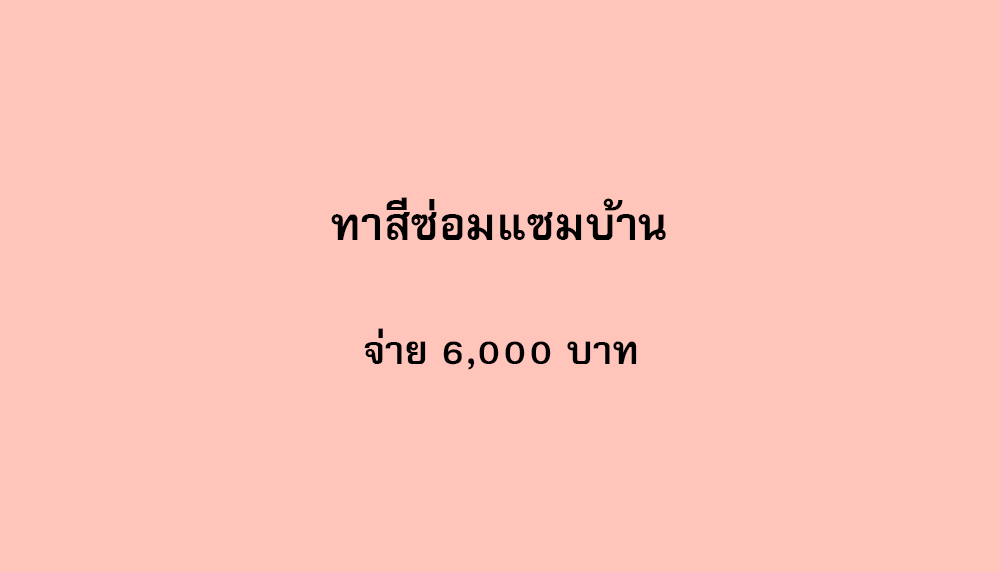
<style>
.page{position:relative;width:1000px;height:572px;background:#ffc4ba}
.page>*{position:absolute;margin:0}
.t1{font:64px "FreesiaUPCBold";color:#000000}
.t2{font:56px "FreesiaUPCBold";color:#000000}
</style>
<div class="page">
<p class="t1" style="left:331px;top:197px;width:335px;height:43px">ทาสีซ่อมแซมบ้าน</p>
<p class="t2" style="left:364px;top:328px;width:273px;height:42px">จ่าย 6,000 บาท</p>
</div>
